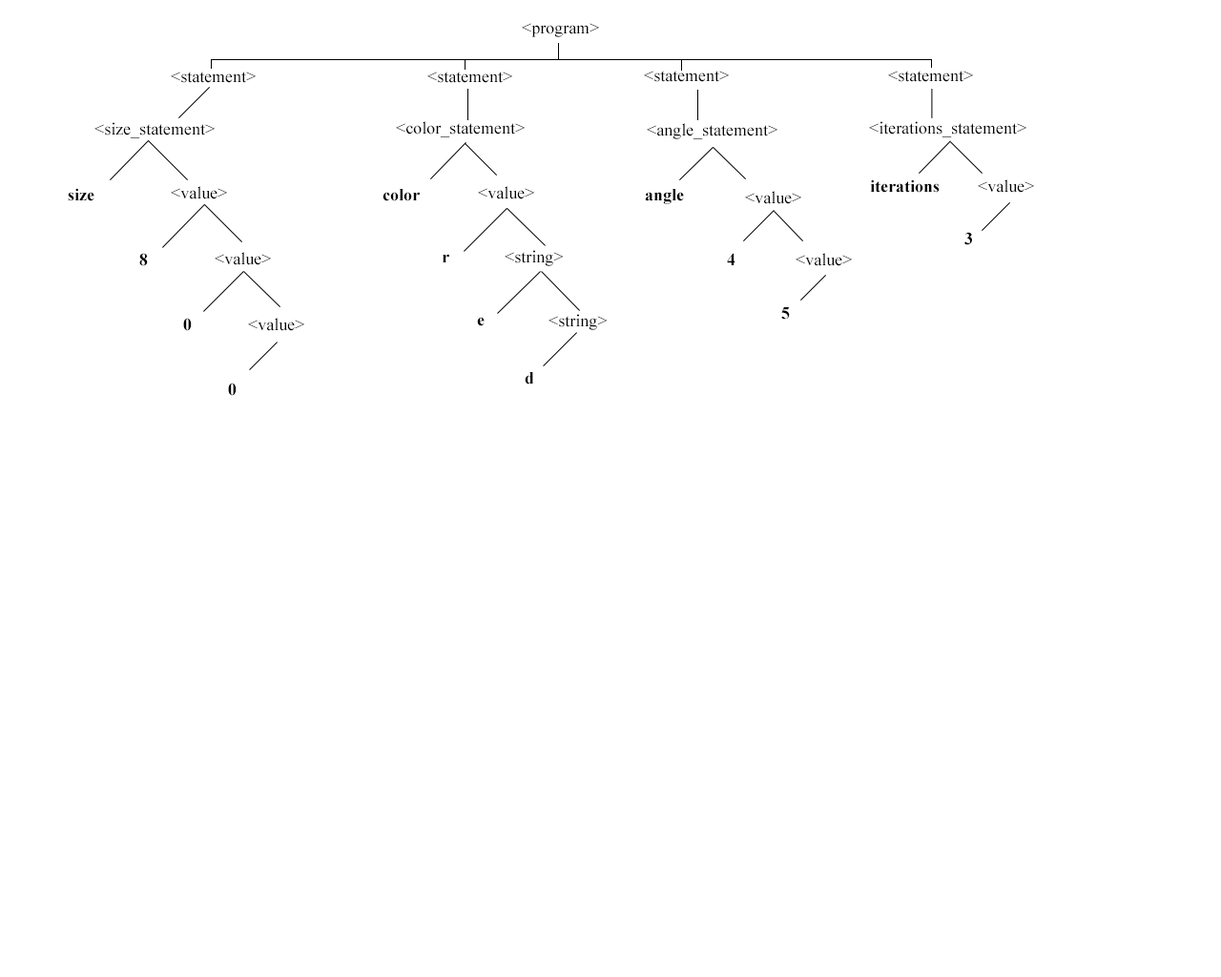
<style>
.page{position:relative;width:1221px;height:977px;background:#ffffff}
.page>*{position:absolute;margin:0}
.t1{font:17.2px "TimesNewRomanPSMT";color:#000000}
.t2{font:17.2px "TimesNewRomanPS-BoldMT";color:#000000}
</style>
<div class="page">
<p class="t1" style="left:522px;top:23px;width:77px;height:14px">&lt;program&gt;</p>
<p class="t1" style="left:171px;top:72px;width:85px;height:11px">&lt;statement&gt;</p>
<p class="t1" style="left:427px;top:72px;width:85px;height:11px">&lt;statement&gt;</p>
<p class="t1" style="left:644px;top:71px;width:85px;height:11px">&lt;statement&gt;</p>
<p class="t1" style="left:888px;top:71px;width:85px;height:11px">&lt;statement&gt;</p>
<p class="t1" style="left:94px;top:122px;width:121px;height:16px">&lt;size_statement&gt;</p>
<p class="t1" style="left:396px;top:121px;width:129px;height:16px">&lt;color_statement&gt;</p>
<p class="t1" style="left:647px;top:123px;width:130px;height:16px">&lt;angle_statement&gt;</p>
<p class="t1" style="left:869px;top:121px;width:157px;height:16px">&lt;iterations_statement&gt;</p>
<p class="t1" style="left:171px;top:186px;width:56px;height:13px">&lt;value&gt;</p>
<p class="t1" style="left:478px;top:186px;width:56px;height:13px">&lt;value&gt;</p>
<p class="t2" style="left:870px;top:179px;width:70px;height:14px">iterations</p>
<p class="t1" style="left:978px;top:179px;width:56px;height:14px">&lt;value&gt;</p>
<p class="t2" style="left:68px;top:188px;width:26px;height:13px">size</p>
<p class="t2" style="left:382px;top:189px;width:38px;height:12px">color</p>
<p class="t2" style="left:645px;top:189px;width:39px;height:15px">angle</p>
<p class="t1" style="left:745px;top:191px;width:56px;height:13px">&lt;value&gt;</p>
<p class="t2" style="left:964px;top:232px;width:8px;height:13px">3</p>
<p class="t2" style="left:139px;top:253px;width:9px;height:13px">8</p>
<p class="t1" style="left:215px;top:252px;width:56px;height:13px">&lt;value&gt;</p>
<p class="t2" style="left:443px;top:254px;width:6px;height:8px">r</p>
<p class="t1" style="left:505px;top:250px;width:59px;height:16px">&lt;string&gt;</p>
<p class="t2" style="left:727px;top:253px;width:8px;height:12px">4</p>
<p class="t1" style="left:795px;top:253px;width:57px;height:13px">&lt;value&gt;</p>
<p class="t2" style="left:183px;top:318px;width:9px;height:13px">0</p>
<p class="t1" style="left:248px;top:318px;width:56px;height:13px">&lt;value&gt;</p>
<p class="t2" style="left:477px;top:317px;width:8px;height:9px">e</p>
<p class="t1" style="left:548px;top:314px;width:60px;height:16px">&lt;string&gt;</p>
<p class="t2" style="left:781px;top:307px;width:9px;height:13px">5</p>
<p class="t2" style="left:525px;top:372px;width:9px;height:12px">d</p>
<p class="t2" style="left:228px;top:382px;width:9px;height:14px">0</p>
</div>
